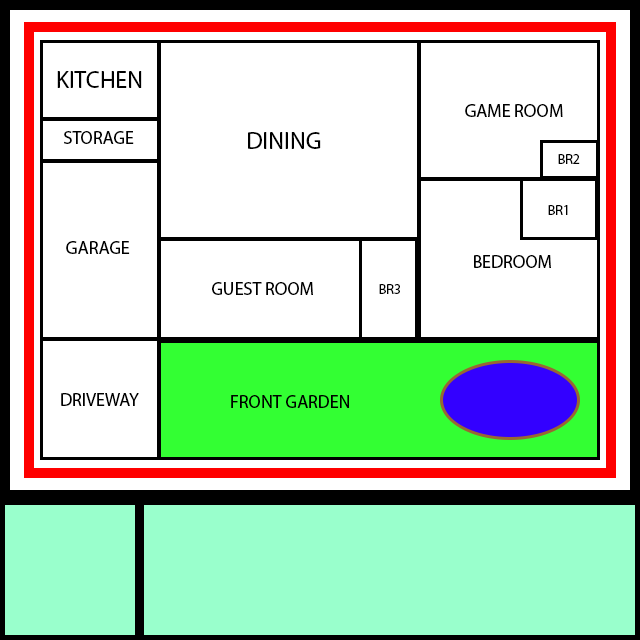
<style>
.page{position:relative;width:640px;height:640px;background:#ffffff}
.page>*{position:absolute;margin:0}
.t1{font:24px "MyriadPro-Regular";color:#000000}
.t2{font:18px "MyriadPro-Regular";color:#000000}
.t3{font:14px "MyriadPro-Regular";color:#000000}
</style>
<div class="page">
<p class="t1" style="left:57px;top:71px;width:85px;height:17px">KITCHEN</p>
<p class="t2" style="left:465px;top:104px;width:98px;height:13px">GAME ROOM</p>
<p class="t2" style="left:64px;top:131px;width:70px;height:13px">STORAGE</p>
<p class="t1" style="left:248px;top:132px;width:73px;height:17px">DINING</p>
<p class="t3" style="left:558px;top:154px;width:22px;height:10px">BR2</p>
<p class="t2" style="left:66px;top:241px;width:64px;height:13px">GARAGE</p>
<p class="t2" style="left:474px;top:255px;width:77px;height:13px">BEDROOM</p>
<p class="t2" style="left:212px;top:282px;width:101px;height:13px">GUEST ROOM</p>
<p class="t3" style="left:379px;top:284px;width:21px;height:10px">BR3</p>
<p class="t2" style="left:61px;top:393px;width:78px;height:13px">DRIVEWAY</p>
<p class="t2" style="left:231px;top:395px;width:118px;height:13px">FRONT GARDEN</p>
</div>
